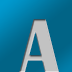
<style>
.page{position:relative;width:72px;height:72px;background:#016486}
.page>*{position:absolute;margin:0}
.t1{font:79.2px "BritannicBold";color:#c2c2c2;scale:0.9 1}
</style>
<div class="page">
<p class="t1" style="left:19px;top:19px;width:40px;height:53px">A</p>
</div>
